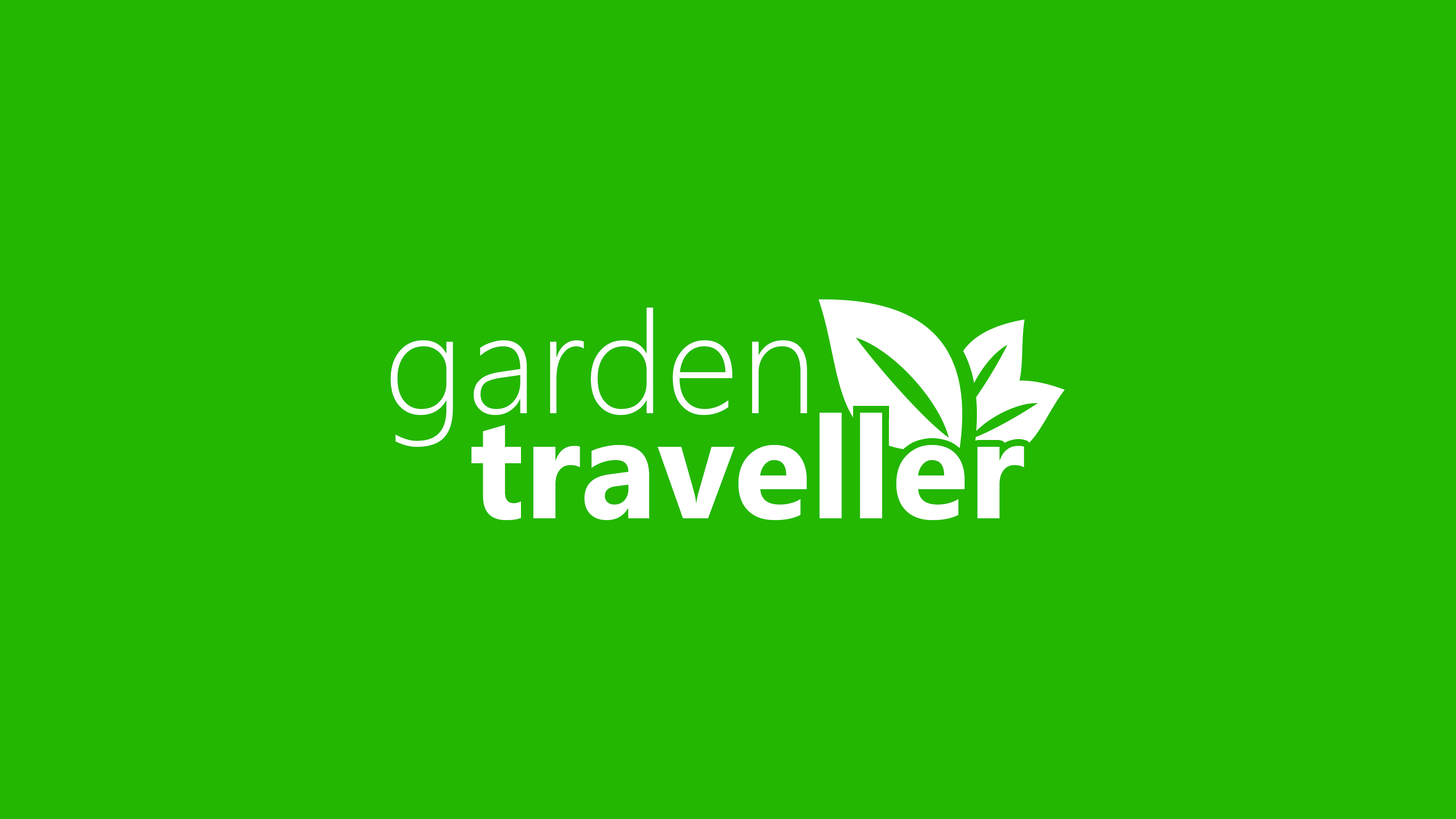
<style>
.page{position:relative;width:1456px;height:819px;background:#23b701}
.page>*{position:absolute;margin:0}
.t1{font:142.4px "SegoeUI-Light";letter-spacing:0.014em;color:#ffffff}
.t2{font:142.4px "SegoeUI-Bold";color:#ffffff}
</style>
<div class="page">
<p class="t1" style="left:390px;top:308px;width:417px;height:139px">garden</p>
<p class="t2" style="left:471px;top:413px;width:553px;height:107px">traveller</p>
</div>
